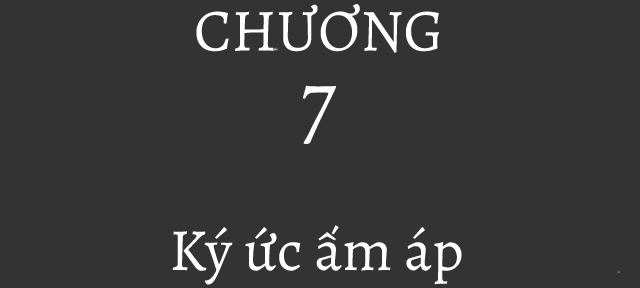
<style>
.page{position:relative;width:640px;height:288px;background:#333333}
.page>*{position:absolute;margin:0}
.t1{font:60px "Alegreya-Regular";color:#ffffff}
</style>
<div class="page">
<p class="t1" style="left:196px;top:4px;width:243px;height:49px">CHƯƠNG</p>
<p class="t1" style="left:172px;top:225px;width:290px;height:60px">Ký ức ấm áp</p>
</div>
